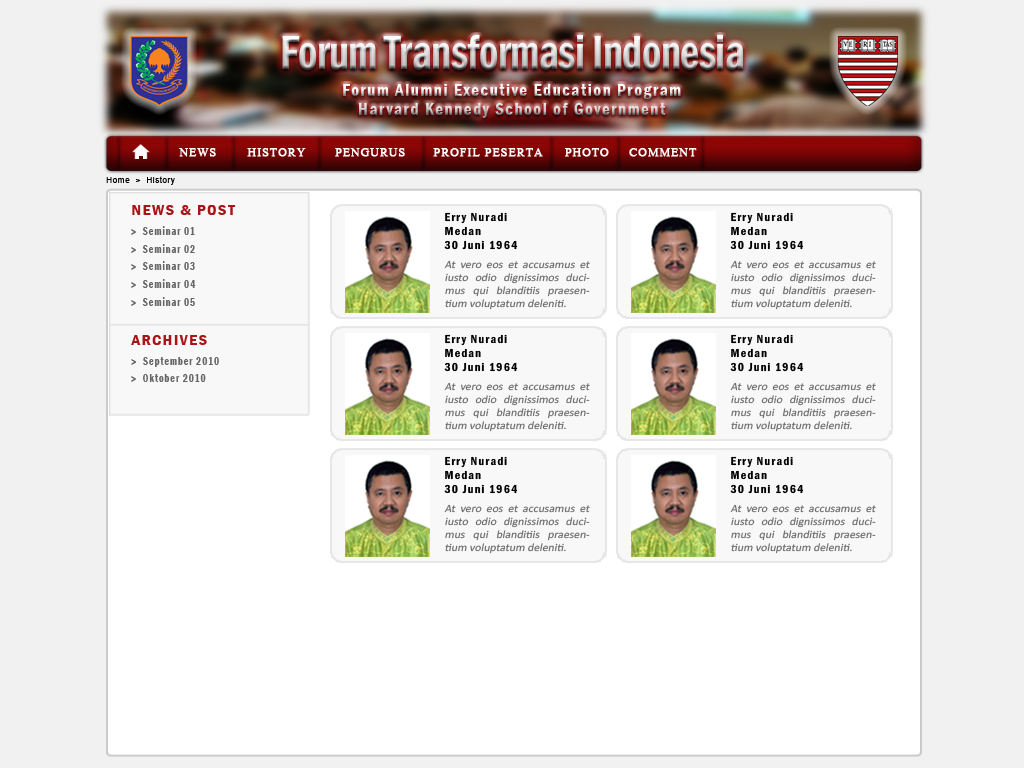
<style>
.page{position:relative;width:1024px;height:768px;background:#ffffff}
.page>*{position:absolute;margin:0}
.t1{font:50px "FranklinGothic-DemiCond";letter-spacing:-0.01em;scale:0.83 1}
.t2{font:16.7px/18.8px "FranklinGothic-DemiCond";letter-spacing:0.1em}
.t3{font:14.6px "Aparajita";letter-spacing:0.05em;color:#ffffff;font-weight:bold}
.t4{font:8.3px "ArialMT";letter-spacing:0.05em;color:#000000}
.t5{font:15px "FranklinGothic-DemiCond";letter-spacing:0.09em;color:#a91617;scale:1.11 1}
.t6{font:12px "FranklinGothic-DemiCond";letter-spacing:0.1em;color:#000000}
.t7{font:11.2px "FranklinGothic-DemiCond";letter-spacing:0.09em;color:#666666;scale:0.9 1}
.t8{font:11.3px "FranklinGothic-DemiCond";letter-spacing:0.09em;color:#666666;scale:0.9 1}
.t9{font:11px "Calibri";color:#6d6d6d;font-style:italic;scale:1.07 1}
</style>
<div class="page">
<p class="t1" style="left:282px;top:35px;width:462px;height:35px">Forum Transformasi Indonesia</p>
<p class="t2" style="left:343px;top:84px;width:338px;height:34px;text-align:center">Forum Alumni Executive Education Program<br>Harvard Kennedy School of Government</p>
<p class="t3" style="left:179px;top:148px;width:37px;height:9px">NEWS</p>
<p class="t3" style="left:247px;top:148px;width:59px;height:9px">HISTORY</p>
<p class="t3" style="left:335px;top:148px;width:70px;height:9px">PENGURUS</p>
<p class="t3" style="left:433px;top:148px;width:110px;height:9px">PROFIL PESERTA</p>
<p class="t3" style="left:564px;top:148px;width:45px;height:9px">PHOTO</p>
<p class="t3" style="left:629px;top:148px;width:68px;height:9px">COMMENT</p>
<p class="t4" style="left:106px;top:176px;width:69px;height:9px">Home  &gt;  History</p>
<p class="t5" style="left:132px;top:205px;width:104px;height:10px">NEWS &amp; POST</p>
<p class="t6" style="left:445px;top:212px;width:62px;height:12px">Erry Nuradi</p>
<p class="t6" style="left:731px;top:212px;width:62px;height:12px">Erry Nuradi</p>
<p class="t7" style="left:131px;top:226px;width:64px;height:9px">&gt;  Seminar 01</p>
<p class="t6" style="left:445px;top:226px;width:36px;height:10px">Medan</p>
<p class="t6" style="left:731px;top:226px;width:36px;height:10px">Medan</p>
<p class="t7" style="left:131px;top:244px;width:64px;height:9px">&gt;  Seminar 02</p>
<p class="t6" style="left:444px;top:240px;width:74px;height:10px">30 Juni 1964</p>
<p class="t6" style="left:730px;top:240px;width:74px;height:10px">30 Juni 1964</p>
<p class="t8" style="left:131px;top:261px;width:64px;height:9px">&gt;  Seminar 03</p>
<p class="t9" style="left:444px;top:260px;width:146px;height:50px;text-align:justify">At vero eos et accusamus et iusto odio dignissimos ducimus qui blanditiis praesentium voluptatum deleniti.</p>
<p class="t9" style="left:730px;top:260px;width:146px;height:50px;text-align:justify">At vero eos et accusamus et iusto odio dignissimos ducimus qui blanditiis praesentium voluptatum deleniti.</p>
<p class="t7" style="left:131px;top:279px;width:65px;height:9px">&gt;  Seminar 04</p>
<p class="t7" style="left:131px;top:297px;width:64px;height:9px">&gt;  Seminar 05</p>
<p class="t5" style="left:131px;top:335px;width:76px;height:10px">ARCHIVES</p>
<p class="t6" style="left:445px;top:334px;width:62px;height:12px">Erry Nuradi</p>
<p class="t6" style="left:731px;top:334px;width:62px;height:12px">Erry Nuradi</p>
<p class="t6" style="left:445px;top:348px;width:36px;height:10px">Medan</p>
<p class="t6" style="left:731px;top:348px;width:36px;height:10px">Medan</p>
<p class="t7" style="left:131px;top:357px;width:88px;height:10px">&gt;  September 2010</p>
<p class="t6" style="left:444px;top:362px;width:74px;height:10px">30 Juni 1964</p>
<p class="t6" style="left:730px;top:362px;width:74px;height:10px">30 Juni 1964</p>
<p class="t7" style="left:131px;top:374px;width:75px;height:8px">&gt;  Oktober 2010</p>
<p class="t9" style="left:444px;top:382px;width:146px;height:50px;text-align:justify">At vero eos et accusamus et iusto odio dignissimos ducimus qui blanditiis praesentium voluptatum deleniti.</p>
<p class="t9" style="left:730px;top:382px;width:146px;height:50px;text-align:justify">At vero eos et accusamus et iusto odio dignissimos ducimus qui blanditiis praesentium voluptatum deleniti.</p>
<p class="t6" style="left:445px;top:456px;width:62px;height:12px">Erry Nuradi</p>
<p class="t6" style="left:731px;top:456px;width:62px;height:12px">Erry Nuradi</p>
<p class="t6" style="left:445px;top:470px;width:36px;height:10px">Medan</p>
<p class="t6" style="left:731px;top:470px;width:36px;height:10px">Medan</p>
<p class="t6" style="left:444px;top:484px;width:74px;height:10px">30 Juni 1964</p>
<p class="t6" style="left:730px;top:484px;width:74px;height:10px">30 Juni 1964</p>
<p class="t9" style="left:444px;top:504px;width:146px;height:50px;text-align:justify">At vero eos et accusamus et iusto odio dignissimos ducimus qui blanditiis praesentium voluptatum deleniti.</p>
<p class="t9" style="left:730px;top:504px;width:146px;height:50px;text-align:justify">At vero eos et accusamus et iusto odio dignissimos ducimus qui blanditiis praesentium voluptatum deleniti.</p>
</div>
